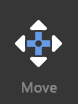
<style>
.page{position:relative;width:78px;height:104px;background:#363636}
.page>*{position:absolute;margin:0}
.t1{font:14px "SegoeUI";color:#848484;font-weight:bold}
</style>
<div class="page">
<p class="t1" style="left:22px;top:82px;width:35px;height:11px">Move</p>
</div>
